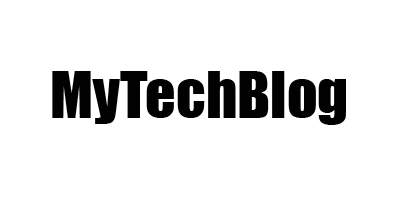
<style>
.page{position:relative;width:400px;height:200px;background:#ffffff}
.page>*{position:absolute;margin:0}
.t1{font:60px "Impact";color:#010101}
</style>
<div class="page">
<p class="t1" style="left:52px;top:71px;width:294px;height:54px">MyTechBlog</p>
</div>
